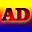
<style>
.page{position:relative;width:32px;height:32px}
.page>*{position:absolute;margin:0}
.t1{font:18.8px "ClarendonBT-Black";color:#ff0202}
</style>
<div class="page">
<p class="t1" style="left:1px;top:8px;width:29px;height:13px">AD</p>
</div>
